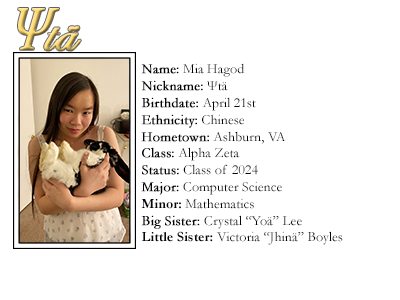
<style>
.page{position:relative;width:400px;height:300px;background:#ffffff}
.page>*{position:absolute;margin:0}
.t1{font:60px "EdwardianScriptITC";font-weight:bold}
.t2{font:60px "Constantia-Italic";letter-spacing:-0.16em;font-weight:bold;font-style:italic;scale:0.81 1}
.t3{font:14px "Garamond";color:#000000}
.t4{font:14px "Garamond";color:#000000;font-weight:bold}
.t5{font:14px "Garamond-Bold";color:#000000}
</style>
<div class="page">
<p class="t1" style="left:18px;top:8px;width:63px;height:43px"><span class="t2">Ψ</span>tä</p>
<p class="t3" style="left:141px;top:63px;width:202px;height:182px"><span class="t4">Name:</span> Mia Hagod<br><span class="t4">Nickname:</span> Ψtä<br><span class="t4">Birthdate:</span> April 21st<br><span class="t4">Ethnicity:</span> Chinese<br><span class="t4">Hometown:</span> Ashburn, VA<br><span class="t4">Class:</span> Alpha Zeta<br><span class="t4">Status:</span> Class of 2024<br><span class="t4">Major:</span> Computer Science<br><span class="t5">Minor:</span> Mathematics<br><span class="t4">Big Sister: </span>Crystal “Yoä” Lee<br><span class="t5">Little Sister:</span> Victoria “Jhinä” Boyles</p>
</div>
